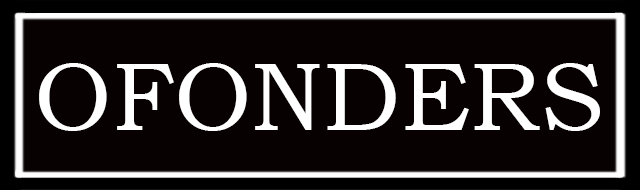
<style>
.page{position:relative;width:640px;height:190px;background:#080101}
.page>*{position:absolute;margin:0}
.t1{font:97px "BookmanOldStyle";color:#ffffff}
</style>
<div class="page">
<p class="t1" style="left:39px;top:63px;width:561px;height:68px">OFONDERS</p>
</div>
